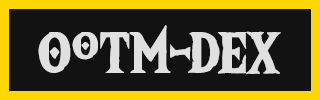
<style>
.page{position:relative;width:320px;height:100px;background:#121212}
.page>*{position:absolute;margin:0}
.t1{font:58.3px "TheWildBreathofZelda";color:#e0e0e0}
</style>
<div class="page">
<p class="t1" style="left:38px;top:25px;width:243px;height:49px">OoTM-DEX</p>
</div>
